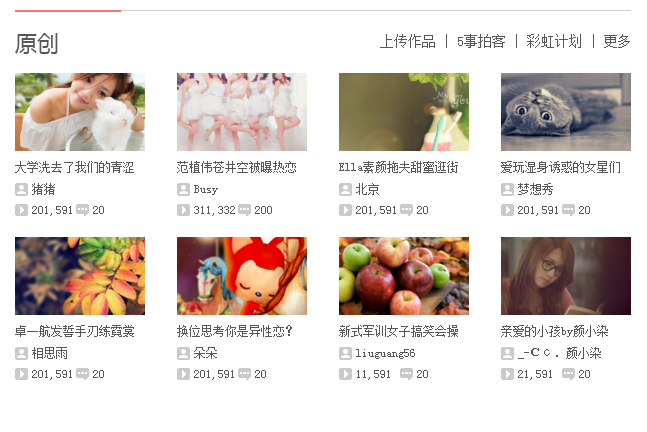
<style>
.page{position:relative;width:647px;height:432px;background:#ffffff}
.page>*{position:absolute;margin:0}
.t1{font:22px "MicrosoftYaHeiUI";color:#575757}
.t2{font:14px "SimSun";color:#575757}
.t3{font:12px "SimSun";color:#575757}
</style>
<div class="page">
<p class="t1" style="left:15px;top:33px;width:43px;height:21px">原创</p>
<p class="t2" style="left:380px;top:34px;width:250px;height:14px">上传作品 | 5事拍客 | 彩虹计划 | 更多</p>
<p class="t3" style="left:15px;top:161px;width:119px;height:12px">大学洗去了我们的青涩</p>
<p class="t3" style="left:177px;top:161px;width:119px;height:12px">范植伟苍井空被曝热恋</p>
<p class="t3" style="left:339px;top:161px;width:119px;height:12px">Ella素颜拖夫甜蜜逛街</p>
<p class="t3" style="left:501px;top:161px;width:119px;height:12px">爱玩湿身诱惑的女星们</p>
<p class="t3" style="left:32px;top:183px;width:23px;height:12px">猪猪</p>
<p class="t3" style="left:194px;top:185px;width:24px;height:10px">Busy</p>
<p class="t3" style="left:356px;top:183px;width:23px;height:12px">北京</p>
<p class="t3" style="left:518px;top:183px;width:35px;height:12px">梦想秀</p>
<p class="t3" style="left:32px;top:206px;width:40px;height:10px">201,591</p>
<p class="t3" style="left:93px;top:206px;width:11px;height:8px">20</p>
<p class="t3" style="left:194px;top:206px;width:41px;height:10px">311,332</p>
<p class="t3" style="left:255px;top:206px;width:17px;height:8px">200</p>
<p class="t3" style="left:356px;top:206px;width:40px;height:10px">201,591</p>
<p class="t3" style="left:417px;top:206px;width:11px;height:8px">20</p>
<p class="t3" style="left:518px;top:206px;width:40px;height:10px">201,591</p>
<p class="t3" style="left:579px;top:206px;width:11px;height:8px">20</p>
<p class="t3" style="left:15px;top:325px;width:119px;height:12px">卓一航发誓手刃练霓裳</p>
<p class="t3" style="left:177px;top:325px;width:115px;height:12px">换位思考你是异性恋？</p>
<p class="t3" style="left:339px;top:325px;width:119px;height:12px">新式军训女子搞笑会操</p>
<p class="t3" style="left:501px;top:325px;width:107px;height:12px">亲爱的小孩by颜小染</p>
<p class="t3" style="left:32px;top:347px;width:35px;height:12px">相思雨</p>
<p class="t3" style="left:194px;top:347px;width:23px;height:12px">朵朵</p>
<p class="t3" style="left:356px;top:349px;width:59px;height:10px">liuguang56</p>
<p class="t3" style="left:518px;top:347px;width:83px;height:12px">_-Ｃс．颜小染</p>
<p class="t3" style="left:32px;top:370px;width:40px;height:10px">201,591</p>
<p class="t3" style="left:93px;top:370px;width:11px;height:8px">20</p>
<p class="t3" style="left:194px;top:370px;width:40px;height:10px">201,591</p>
<p class="t3" style="left:255px;top:370px;width:11px;height:8px">20</p>
<p class="t3" style="left:357px;top:370px;width:33px;height:10px">11,591</p>
<p class="t3" style="left:417px;top:370px;width:11px;height:8px">20</p>
<p class="t3" style="left:518px;top:370px;width:34px;height:10px">21,591</p>
<p class="t3" style="left:579px;top:370px;width:11px;height:8px">20</p>
</div>
